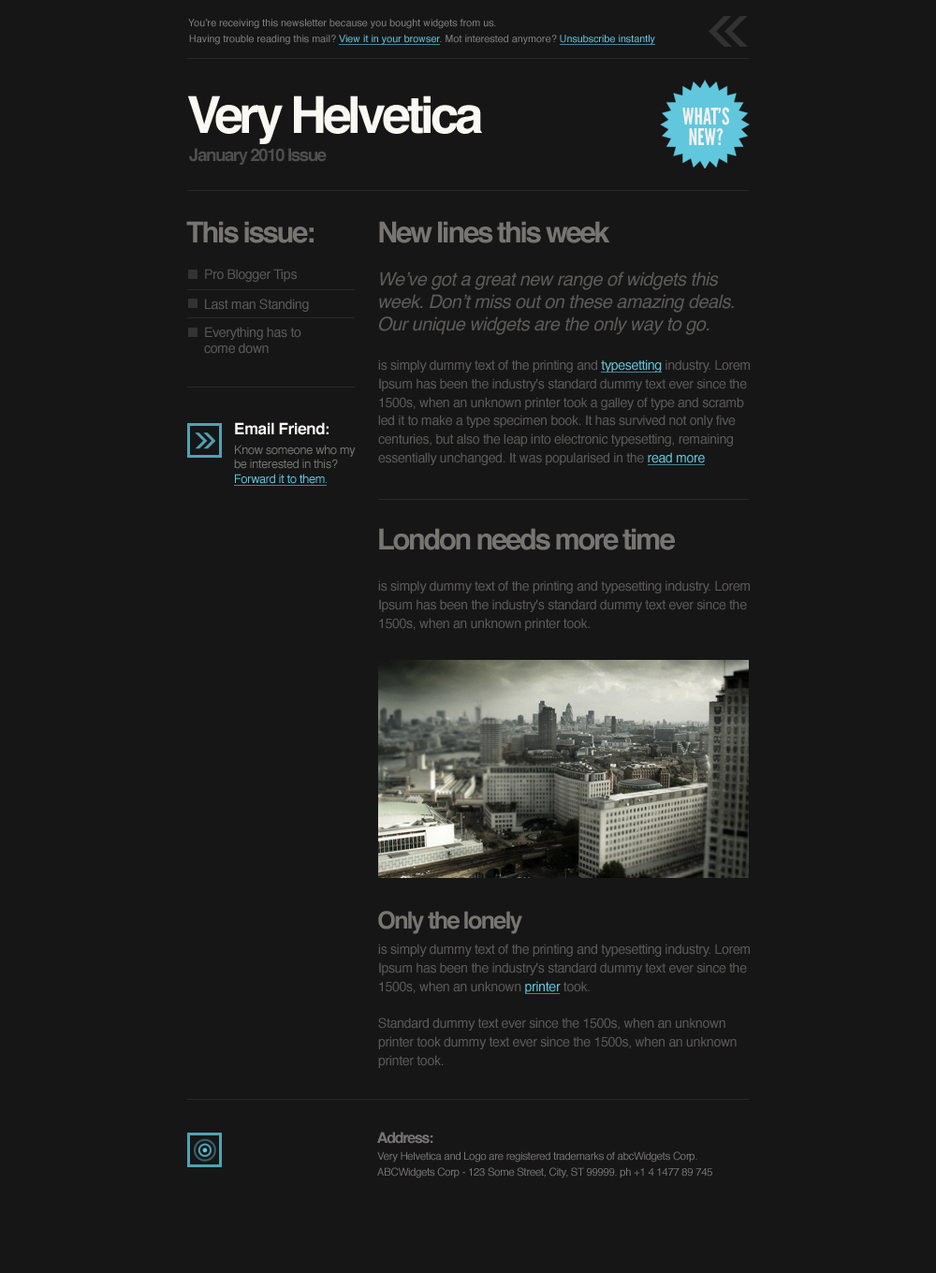
<style>
.page{position:relative;width:936px;height:1273px;background:#161616}
.page>*{position:absolute;margin:0}
.t1{font:10.1px "Helvetica";color:#808080}
.t2{font:10.1px "Helvetica";color:#61c7dd}
.t3{font:51px "Helvetica-Bold";letter-spacing:-0.075em;color:#f9f8f2}
.t4{font:17.4px "Helvetica-Bold";letter-spacing:-0.075em;color:#4e4e4e}
.t5{font:28.9px "Helvetica-Bold";letter-spacing:-0.075em;color:#767572}
.t6{font:13.3px "Helvetica";letter-spacing:-0.025em;color:#5b5a58}
.t7{font:18.6px/22.6px "Helvetica-Oblique";letter-spacing:-0.025em;color:#5b5a58}
.t8{font:13.3px/15.9px "Helvetica";letter-spacing:-0.025em;color:#5b5a58}
.t9{font:13.3px/18.6px "Helvetica";letter-spacing:-0.025em;color:#5b5a58}
.t10{font:13.3px/18.6px "Helvetica";letter-spacing:-0.025em;color:#61c7dd}
.t11{font:15.9px "Helvetica-Bold";letter-spacing:-0.025em;color:#f9f8f2}
.t12{font:11.9px/14.3px "Helvetica";letter-spacing:-0.025em;color:#767572}
.t13{font:11.9px/14.3px "Helvetica";letter-spacing:-0.025em;color:#61c7dd}
.t14{font:23.8px "Helvetica-Bold";letter-spacing:-0.075em;color:#767572}
.t15{font:14.9px "Helvetica-Bold";letter-spacing:-0.075em;color:#767572}
.t16{font:10.6px/15.9px "Helvetica";letter-spacing:-0.025em;color:#767572}
</style>
<div class="page">
<p class="t1" style="left:188px;top:19px;width:308px;height:10px">You’re receiving this newsletter because you bought widgets from us.</p>
<p class="t1" style="left:189px;top:35px;width:466px;height:10px">Having trouble reading this mail? <span class="t2">View it in your browser</span>. Mot interested anymore? <span class="t2">Unsubscribe instantly</span></p>
<p class="t3" style="left:188px;top:96px;width:294px;height:48px">Very Helvetica</p>
<p class="t4" style="left:189px;top:148px;width:138px;height:17px">January 2010 Issue</p>
<p class="t5" style="left:186px;top:221px;width:128px;height:22px">This issue:</p>
<p class="t5" style="left:379px;top:221px;width:232px;height:22px">New lines this week</p>
<p class="t6" style="left:205px;top:269px;width:92px;height:13px">Pro Blogger Tips</p>
<p class="t7" style="left:379px;top:272px;width:355px;height:63px">We’ve got a great new range of widgets this<br>week. Don’t miss out on these amazing deals.<br>Our unique widgets are the only way to go.</p>
<p class="t6" style="left:205px;top:299px;width:104px;height:13px">Last man Standing</p>
<p class="t8" style="left:204px;top:327px;width:98px;height:27px">Everything has to<br>come down</p>
<p class="t9" style="left:378px;top:360px;width:372px;height:105px">is simply dummy text of the printing and <span class="t10">typesetting </span>industry. Lorem<br>Ipsum has been the industry's standard dummy text ever since the<br>1500s, when an unknown printer took a galley of type and scramb<br>led it to make a type specimen book. It has survived not only five<br>centuries, but also the leap into electronic typesetting, remaining<br>essentially unchanged. It was popularised in the <span class="t10">read more</span></p>
<p class="t11" style="left:235px;top:422px;width:94px;height:13px">Email Friend:</p>
<p class="t12" style="left:234px;top:445px;width:122px;height:39px">Know someone who my<br>be interested in this?<br><span class="t13">Forward it to them</span>.</p>
<p class="t5" style="left:379px;top:528px;width:296px;height:23px">London needs more time</p>
<p class="t9" style="left:378px;top:581px;width:372px;height:50px">is simply dummy text of the printing and typesetting industry. Lorem<br>Ipsum has been the industry's standard dummy text ever since the<br>1500s, when an unknown printer took.</p>
<p class="t14" style="left:378px;top:911px;width:144px;height:23px">Only the lonely</p>
<p class="t9" style="left:378px;top:944px;width:372px;height:124px">is simply dummy text of the printing and typesetting industry. Lorem<br>Ipsum has been the industry's standard dummy text ever since the<br>1500s, when an unknown <span class="t10">printer </span>took.<br><br>Standard dummy text ever since the 1500s, when an unknown<br>printer took dummy text ever since the 1500s, when an unknown<br>printer took.</p>
<p class="t15" style="left:377px;top:1132px;width:57px;height:12px">Address:</p>
<p class="t16" style="left:377px;top:1152px;width:336px;height:27px">Very Helvetica and Logo are registered trademarks of abcWidgets Corp.<br>ABCWidgets Corp - 123 Some Street, City, ST 99999. ph +1 4 1477 89 745</p>
</div>
